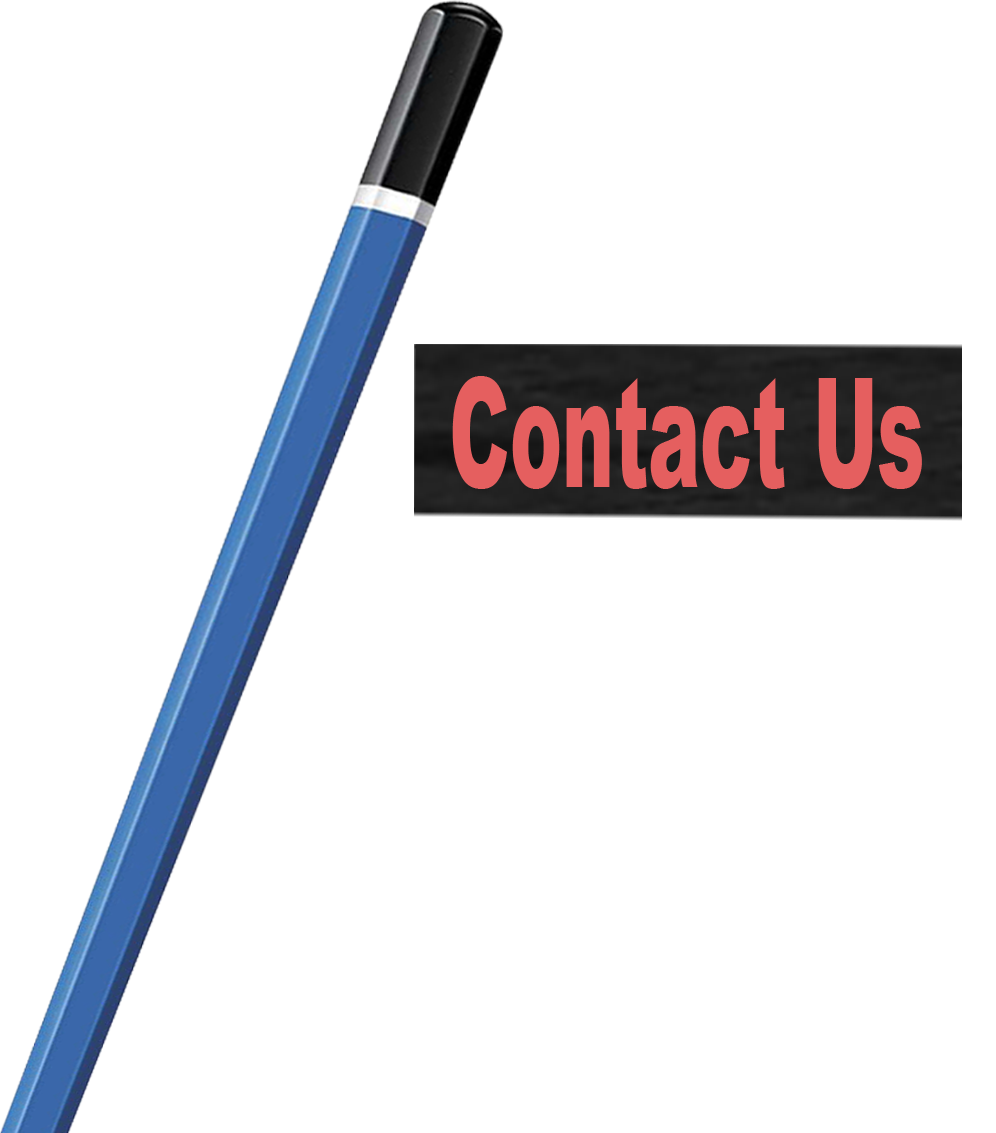
<style>
.page{position:relative;width:996px;height:1133px;background:#ffffff}
.page>*{position:absolute;margin:0}
.t1{font:152px "Arial-Black";color:#e55f5f;scale:0.51 1}
</style>
<div class="page">
<p class="t1" style="left:452px;top:376px;width:470px;height:113px">Contact Us</p>
</div>
